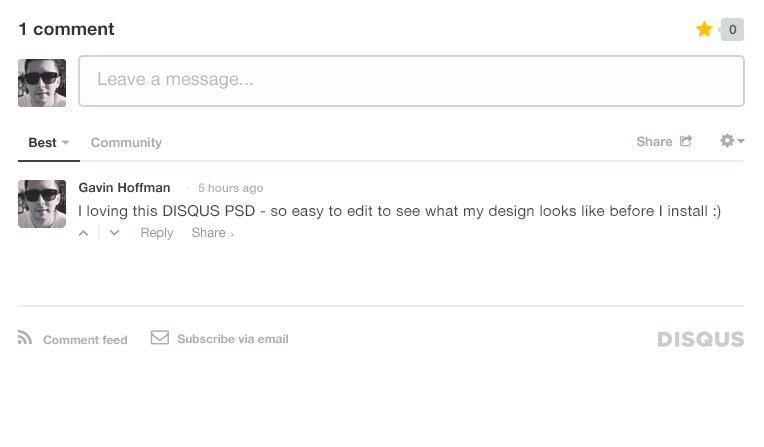
<style>
.page{position:relative;width:764px;height:447px;background:#ffffff}
.page>*{position:absolute;margin:0}
.t1{font:18px "HelveticaNeue-Bold";color:#333333}
.t2{font:13px "HelveticaNeue-Bold";color:#5e5e5e}
.t3{font:18px "HelveticaNeue";letter-spacing:0.005em;color:#b2bbc0}
.t4{font:13px "HelveticaNeue-Bold";color:#a7adb1}
.t5{font:13px "HelveticaNeue-Bold";color:#424242}
.t6{font:12px "HelveticaNeue-Medium";color:#a9b2b9}
.t7{font:15px "HelveticaNeue";letter-spacing:0.02em;color:#41474a}
</style>
<div class="page">
<p class="t1" style="left:19px;top:22px;width:95px;height:14px">1 comment</p>
<p class="t2" style="left:729px;top:24px;width:8px;height:11px">0</p>
<p class="t3" style="left:98px;top:72px;width:155px;height:17px">Leave a message...</p>
<p class="t4" style="left:91px;top:137px;width:71px;height:13px">Community</p>
<p class="t5" style="left:79px;top:182px;width:91px;height:11px">Gavin Hoffman</p>
<p class="t6" style="left:198px;top:183px;width:65px;height:12px">5 hours ago</p>
<p class="t7" style="left:79px;top:205px;width:642px;height:15px">I loving this DISQUS PSD - so easy to edit to see what my design looks like before I install :)</p>
</div>
